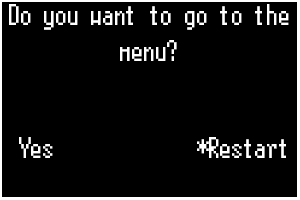
<style>
.page{position:relative;width:300px;height:200px;background:#000000}
.page>*{position:absolute;margin:0}
.t1{font:30px "Terminal";color:#ffffff}
</style>
<div class="page">
<p class="t1" style="left:9px;top:4px;width:280px;height:57px;text-align:center">Do you want to go to the menu?</p>
<p class="t1" style="left:19px;top:137px;width:34px;height:21px">Yes</p>
<p class="t1" style="left:197px;top:137px;width:89px;height:21px">*Restart</p>
</div>
